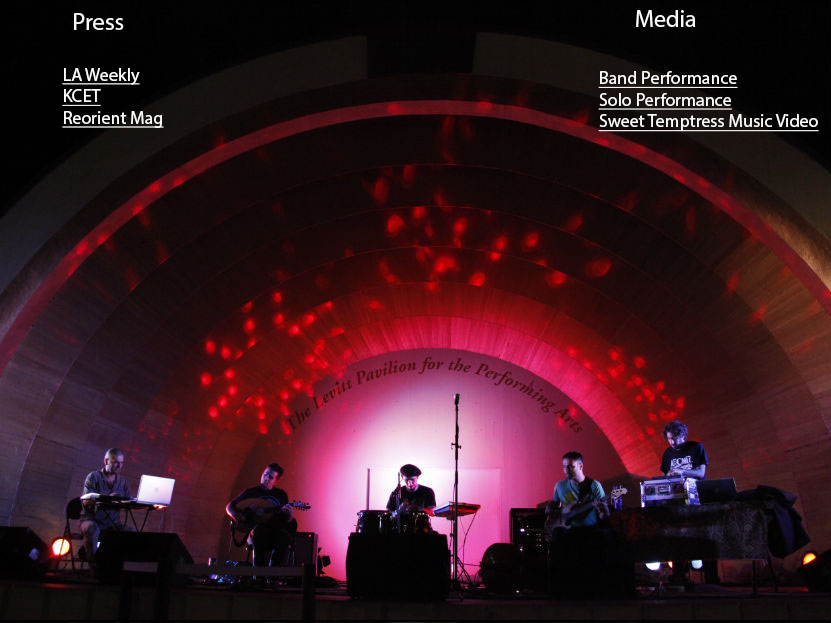
<style>
.page{position:relative;width:831px;height:623px}
.page>*{position:absolute;margin:0}
.t1{font:18px "MyriadPro-Regular";color:#fbfbfb;text-decoration:underline}
.t2{font:24px "MyriadPro-Regular";color:#fbfbfb}
</style>
<div class="page">
<p class="t1" style="left:62px;top:13px;width:102px;height:115px"><span class="t2">  Press<br><br></span>LA Weekly<br>KCET<br>Reorient Mag</p>
<p class="t1" style="left:598px;top:10px;width:221px;height:122px"><span class="t2">       Media<br><br></span>Band Performance<br>Solo Performance<br>Sweet Temptress Music Video</p>
</div>
